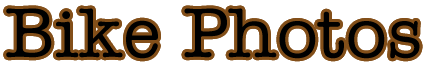
<style>
.page{position:relative;width:427px;height:65px;background:#ffffff}
.page>*{position:absolute;margin:0}
.t1{font:72px "AmerTypewriterITCbyBT-Medium";color:#000000}
</style>
<div class="page">
<p class="t1" style="left:6px;top:8px;width:414px;height:51px">Bike Photos</p>
<p class="t1" style="left:6px;top:8px;width:414px;height:51px">Bike Photos</p>
</div>
